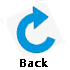
<style>
.page{position:relative;width:70px;height:70px;background:#ffffff}
.page>*{position:absolute;margin:0}
.t1{font:11.1px "MicrosoftYaHei";color:#000000;font-weight:bold}
</style>
<div class="page">
<p class="t1" style="left:20px;top:58px;width:28px;height:9px">Back</p>
</div>
